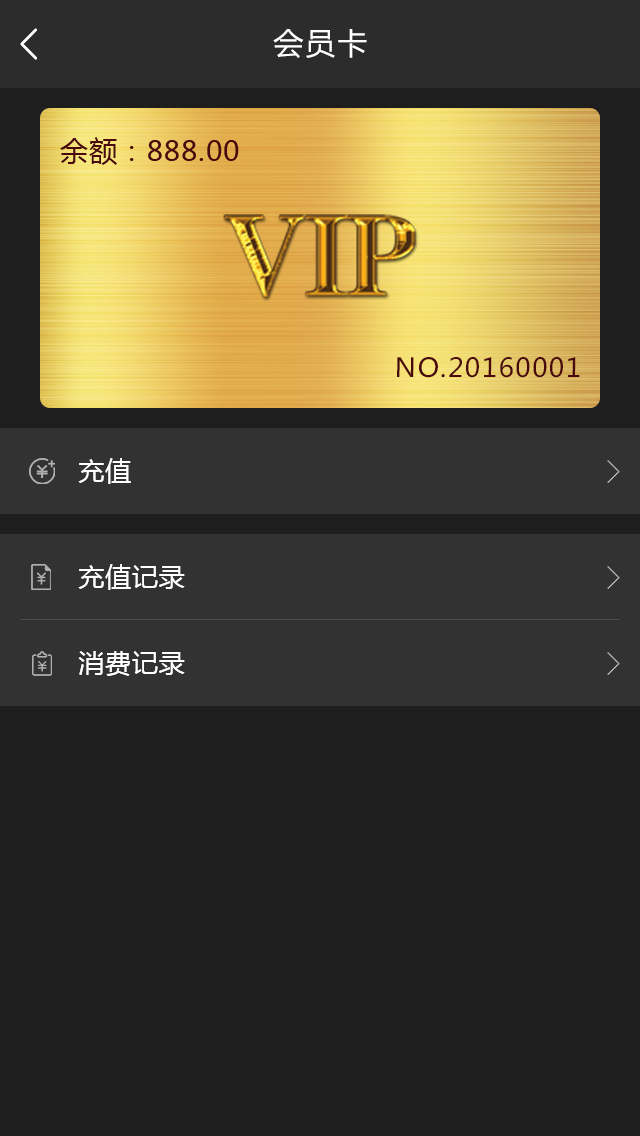
<style>
.page{position:relative;width:640px;height:1136px;background:#1e1e1e}
.page>*{position:absolute;margin:0}
.t1{font:30px "MicrosoftYaHei";letter-spacing:0.07em;color:#ffffff}
.t2{font:28px "MicrosoftYaHei";letter-spacing:0.03em;color:#4a090c}
.t3{font:26px "MicrosoftYaHei";letter-spacing:0.054em;color:#4a090c}
.t4{font:26px "MicrosoftYaHei";letter-spacing:0.03em;color:#ffffff}
</style>
<div class="page">
<p class="t1" style="left:273px;top:29px;width:94px;height:29px">会员卡</p>
<p class="t2" style="left:60px;top:137px;width:179px;height:28px">余额：888.00</p>
<p class="t3" style="left:397px;top:357px;width:183px;height:21px">NO.20160001</p>
<p class="t4" style="left:78px;top:458px;width:53px;height:26px">充值</p>
<p class="t4" style="left:78px;top:564px;width:107px;height:26px">充值记录</p>
<p class="t4" style="left:78px;top:651px;width:107px;height:25px">消费记录</p>
</div>
